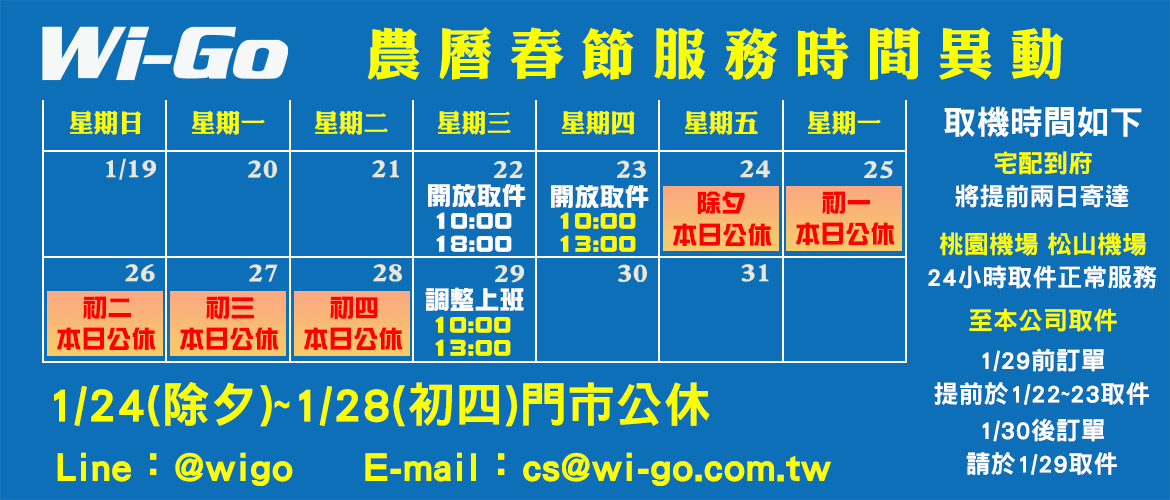
<style>
.page{position:relative;width:1170px;height:500px;background:#0d6fb8}
.page>*{position:absolute;margin:0}
.t1{font:55px "DFLiKingHei-W8-WINP-BF";letter-spacing:0.3em;color:#fcff00}
.t2{font:25px "DFLiKingHei-W8-WINP-BF";color:#fcff00}
.t3{font:33.3px "DFNHei-W9-WINP-BF";color:#ffffff}
.t4{font:25px "DFLiKingHei-W8-WINP-BF";color:#e8e8da}
.t5{font:25px "DFNHei-W9-WINP-BF";color:#fcff00}
.t6{font:25px "DFZongYi-W9-WINP-BF";color:#ffffff}
.t7{font:25px "DFNHei-W9-WINP-BF";color:#fefefe}
.t8{font:25px "DFZongYi-W9-WINP-BF";color:#ff0000}
.t9{font:25px/22.9px "DFZongYi-W9-WINP-BF";color:#ffffff}
.t10{font:25px/22.9px "DFZongYi-W9-WINP-BF";color:#fffc00}
.t11{font:25px "DFNHei-W9-WINP-BF";color:#ffffff}
.t12{font:25px/22.9px "DFZongYi-W9-WINP-BF";color:#fcff00}
.t13{font:25px/33.3px "DFNHei-W9-WINP-BF";color:#ffffff}
.t14{font:48px "DFNHei-W9-WINP-BF";color:#fcff00}
.t15{font:41.7px "DFNHei-W9-WINP-BF";color:#fcff00}
</style>
<div class="page">
<p class="t1" style="left:367px;top:27px;width:697px;height:53px">農曆春節服務時間異動</p>
<p class="t2" style="left:70px;top:110px;width:72px;height:25px">星期日</p>
<p class="t2" style="left:192px;top:110px;width:73px;height:25px">星期一</p>
<p class="t2" style="left:315px;top:110px;width:73px;height:25px">星期二</p>
<p class="t2" style="left:438px;top:110px;width:73px;height:25px">星期三</p>
<p class="t2" style="left:562px;top:110px;width:73px;height:25px">星期四</p>
<p class="t2" style="left:685px;top:110px;width:73px;height:25px">星期五</p>
<p class="t2" style="left:808px;top:110px;width:73px;height:25px">星期一</p>
<p class="t3" style="left:944px;top:106px;width:198px;height:31px">取機時間如下</p>
<p class="t4" style="left:106px;top:158px;width:50px;height:22px">1/19</p>
<p class="t4" style="left:248px;top:160px;width:29px;height:18px">20</p>
<p class="t4" style="left:372px;top:160px;width:27px;height:18px">21</p>
<p class="t4" style="left:494px;top:161px;width:29px;height:17px">22</p>
<p class="t4" style="left:617px;top:160px;width:29px;height:18px">23</p>
<p class="t4" style="left:740px;top:160px;width:30px;height:18px">24</p>
<p class="t4" style="left:864px;top:160px;width:29px;height:19px">25</p>
<p class="t5" style="left:994px;top:151px;width:98px;height:24px">宅配到府</p>
<p class="t6" style="left:428px;top:184px;width:98px;height:23px">開放取件</p>
<p class="t6" style="left:551px;top:185px;width:98px;height:23px">開放取件</p>
<p class="t7" style="left:955px;top:184px;width:174px;height:24px">將提前兩日寄達</p>
<p class="t8" style="left:697px;top:191px;width:48px;height:23px">除夕</p>
<p class="t8" style="left:822px;top:191px;width:48px;height:23px">初一</p>
<p class="t9" style="left:436px;top:212px;width:76px;height:40px">10:00<br>18:00</p>
<p class="t10" style="left:560px;top:212px;width:76px;height:40px">10:00<br>13:00</p>
<p class="t8" style="left:796px;top:222px;width:99px;height:23px">本日公休</p>
<p class="t8" style="left:673px;top:223px;width:99px;height:23px">本日公休</p>
<p class="t5" style="left:939px;top:232px;width:207px;height:24px">桃園機場 松山機場</p>
<p class="t4" style="left:125px;top:264px;width:30px;height:18px">26</p>
<p class="t4" style="left:249px;top:264px;width:29px;height:18px">27</p>
<p class="t4" style="left:373px;top:264px;width:29px;height:18px">28</p>
<p class="t4" style="left:495px;top:265px;width:29px;height:18px">29</p>
<p class="t4" style="left:618px;top:264px;width:29px;height:18px">30</p>
<p class="t4" style="left:741px;top:264px;width:28px;height:18px">31</p>
<p class="t11" style="left:928px;top:265px;width:229px;height:24px">24小時取件正常服務</p>
<p class="t6" style="left:425px;top:287px;width:99px;height:24px">調整上班</p>
<p class="t8" style="left:83px;top:296px;width:48px;height:23px">初二</p>
<p class="t8" style="left:206px;top:296px;width:48px;height:23px">初三</p>
<p class="t8" style="left:330px;top:296px;width:48px;height:23px">初四</p>
<p class="t12" style="left:435px;top:316px;width:76px;height:40px">10:00<br>13:00</p>
<p class="t5" style="left:969px;top:308px;width:148px;height:24px">至本公司取件</p>
<p class="t8" style="left:57px;top:327px;width:99px;height:23px">本日公休</p>
<p class="t8" style="left:180px;top:327px;width:99px;height:23px">本日公休</p>
<p class="t8" style="left:304px;top:327px;width:99px;height:23px">本日公休</p>
<p class="t13" style="left:934px;top:348px;width:215px;height:57px;text-align:center">1/29前訂單<br>提前於1/22~23取件</p>
<p class="t14" style="left:54px;top:382px;width:656px;height:45px">1/24(除夕)~1/28(初四)門市公休</p>
<p class="t13" style="left:966px;top:418px;width:151px;height:57px;text-align:center">1/30後訂單<br>請於1/29取件</p>
<p class="t15" style="left:57px;top:452px;width:774px;height:34px">Line：@wigo     E-mail：cs@wi-go.com.tw</p>
</div>
